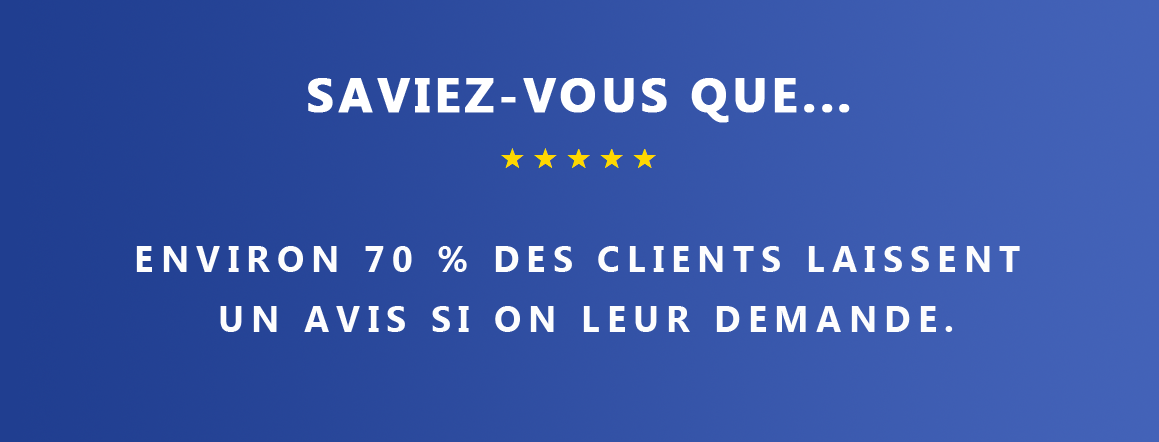
<style>
.page{position:relative;width:1159px;height:442px}
.page>*{position:absolute;margin:0}
.t1{font:48px "MicrosoftTaiLe-Bold";letter-spacing:0.075em;color:#ffffff;font-weight:bold}
.t2{font:36px/60px "MicrosoftTaiLe-Bold";letter-spacing:0.2em;color:#fdfdfd;text-transform:uppercase}
</style>
<div class="page">
<p class="t1" style="left:308px;top:78px;width:542px;height:45px">SAVIEZ-VOUS QUE...</p>
<p class="t2" style="left:136px;top:246px;width:884px;height:86px;text-align:center">Environ 70 % des clients laissent <br>un avis si on leur demande.</p>
</div>
